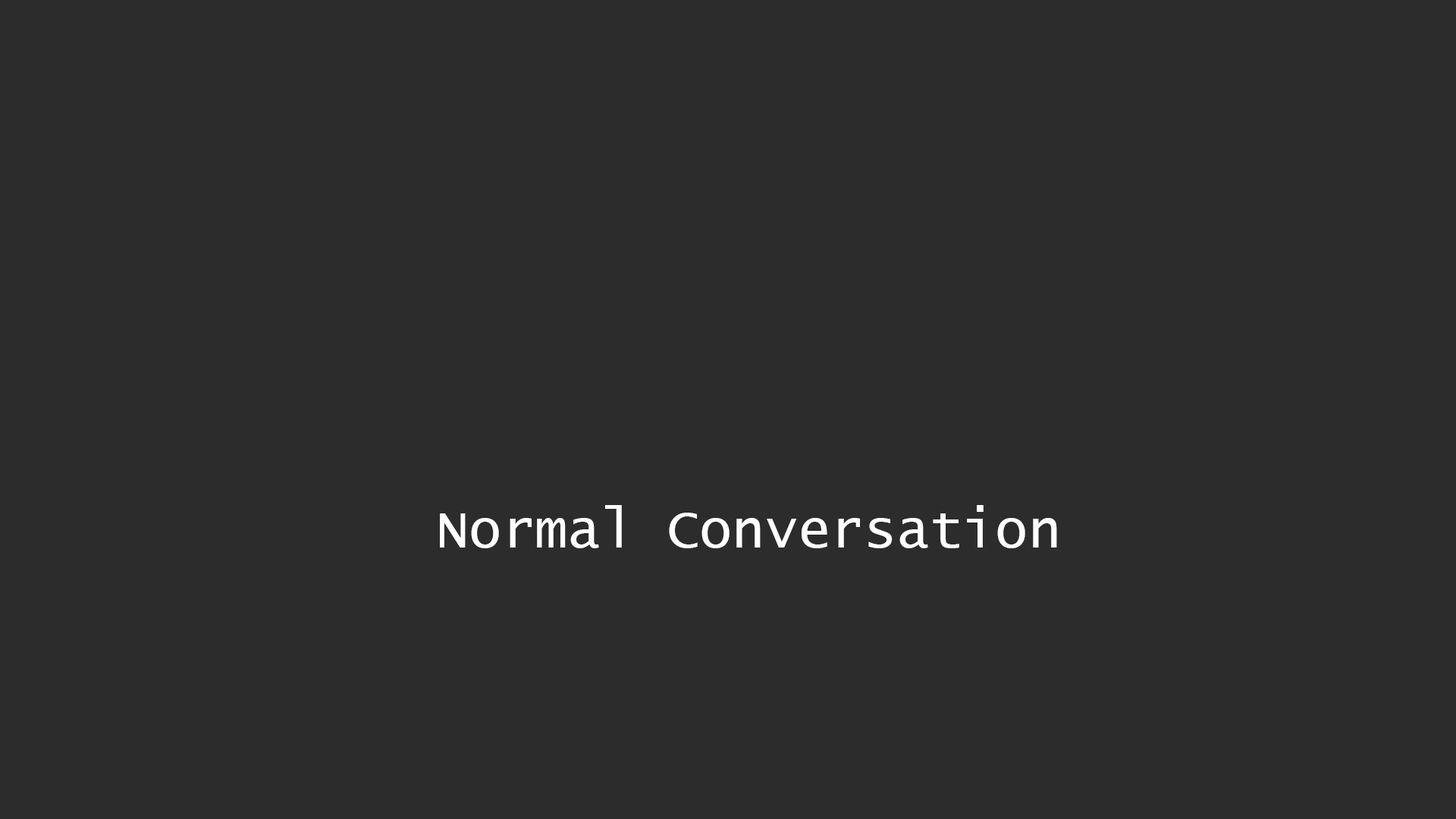
<style>
.page{position:relative;width:1456px;height:819px;background:#2c2c2c}
.page>*{position:absolute;margin:0}
.t1{font:54.6px "LucidaConsole";color:#fefefe}
</style>
<div class="page">
<p class="t1" style="left:440px;top:505px;width:617px;height:43px">Normal Conversation</p>
</div>
